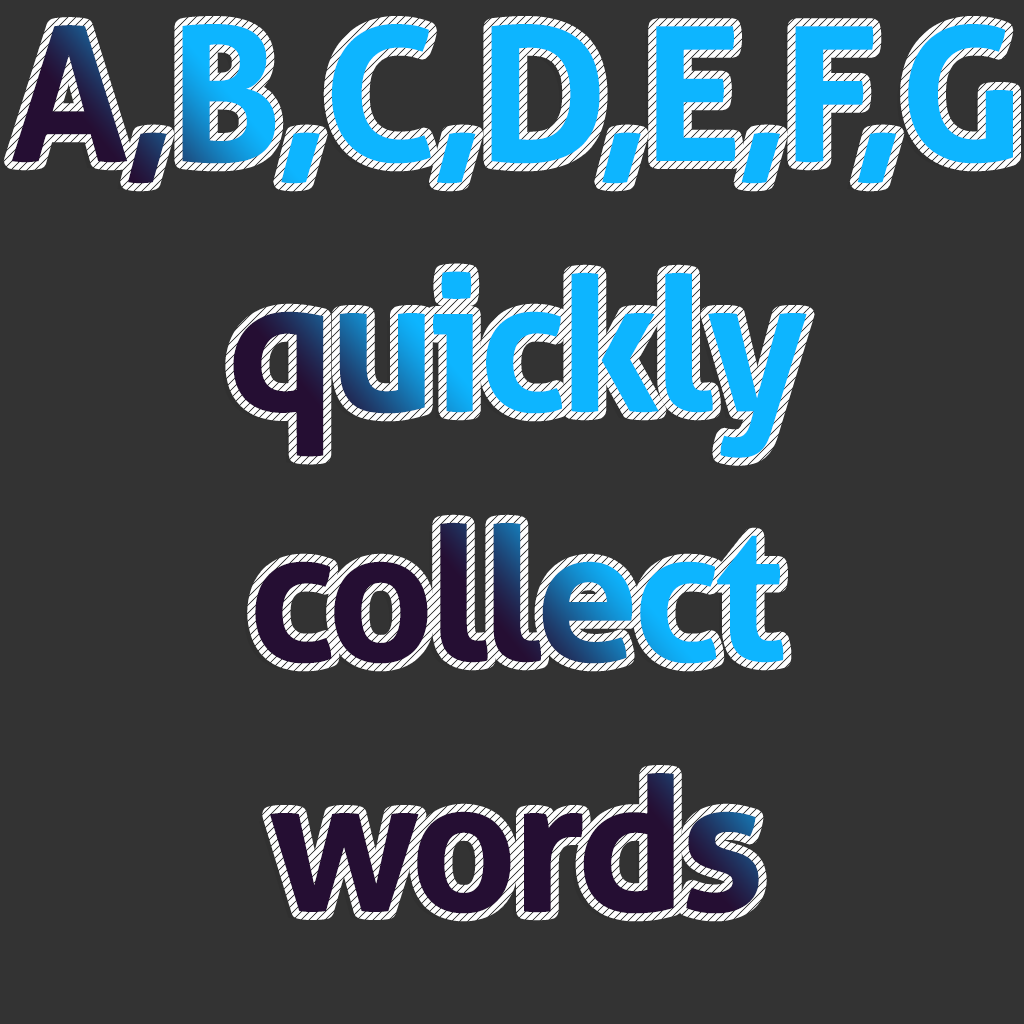
<style>
.page{position:relative;width:1024px;height:1024px;background:#333333}
.page>*{position:absolute;margin:0}
.t1{font:187.3px/250px "Aller-Bold";letter-spacing:-0.039em}
.t2{font:187.3px/200px "Aller-Bold";letter-spacing:-0.039em}
</style>
<div class="page">
<p class="t1" style="left:11px;top:24px;width:1002px;height:890px;text-align:center"><span class="t2">A,B,C,D,E,F,G<br></span>quickly<br>collect<br>words</p>
</div>
